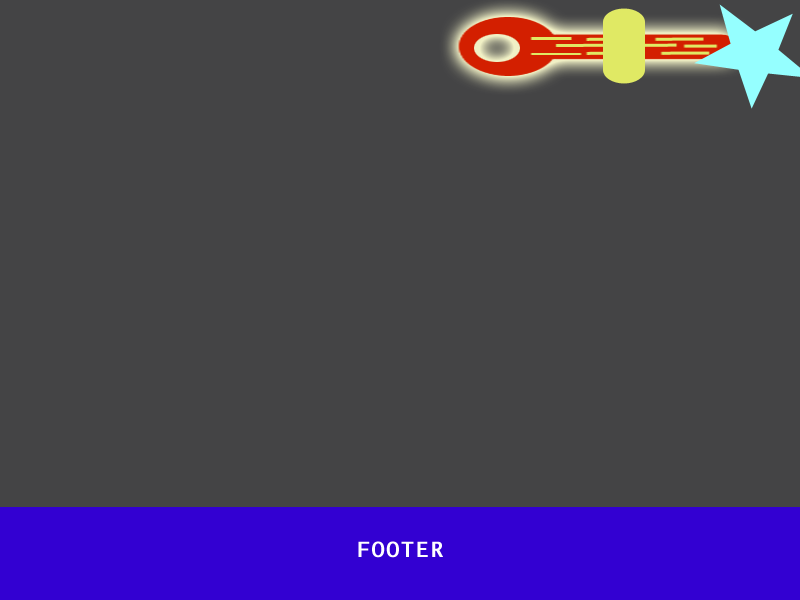
<style>
.page{position:relative;width:800px;height:600px;background:#444445}
.page>*{position:absolute;margin:0}
.t1{font:30px "LucidaSans-TypewriterBold";letter-spacing:0.1em;color:#ffffff;font-variant:small-caps}
</style>
<div class="page">
<p class="t1" style="left:358px;top:541px;width:85px;height:17px">footer</p>
</div>
